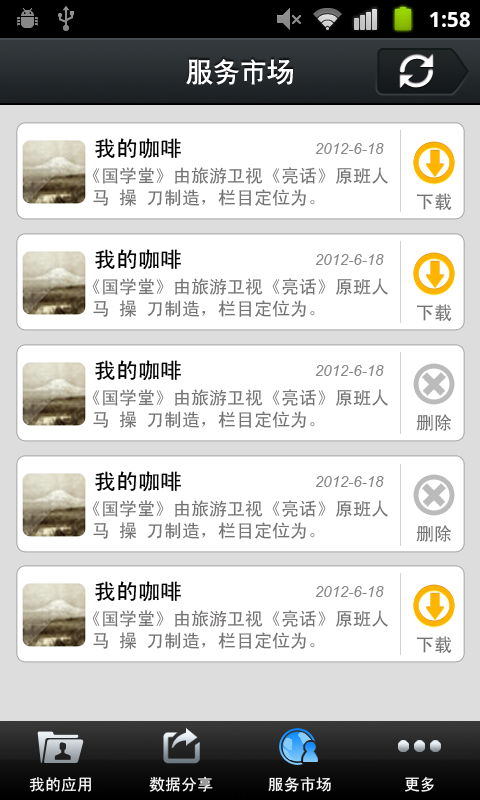
<style>
.page{position:relative;width:480px;height:800px;background:#ffffff}
.page>*{position:absolute;margin:0}
.t1{font:27px "CTCuHeiSJ";color:#ffffff}
.t2{font:22px "SimHei";color:#000000}
.t3{font:15px "Arial-ItalicMT";color:#878787}
.t4{font:18px/22px "SimHei";color:#747272}
.t5{font:18px "SimHei";color:#747272}
.t6{font:16px "SimHei";color:#ffffff}
</style>
<div class="page">
<p class="t1" style="left:186px;top:58px;width:107px;height:27px">服务市场</p>
<p class="t2" style="left:95px;top:138px;width:86px;height:21px">我的咖啡</p>
<p class="t3" style="left:315px;top:143px;width:69px;height:11px">2012-6-18</p>
<p class="t4" style="left:92px;top:167px;width:296px;height:39px">《国学堂》由旅游卫视《亮话》原班人<br> 马 操 刀制造，栏目定位为。</p>
<p class="t5" style="left:416px;top:193px;width:36px;height:17px">下载</p>
<p class="t2" style="left:95px;top:249px;width:86px;height:21px">我的咖啡</p>
<p class="t3" style="left:315px;top:254px;width:69px;height:11px">2012-6-18</p>
<p class="t4" style="left:92px;top:278px;width:296px;height:39px">《国学堂》由旅游卫视《亮话》原班人<br> 马 操 刀制造，栏目定位为。</p>
<p class="t5" style="left:416px;top:304px;width:36px;height:17px">下载</p>
<p class="t2" style="left:95px;top:360px;width:86px;height:21px">我的咖啡</p>
<p class="t3" style="left:315px;top:365px;width:69px;height:11px">2012-6-18</p>
<p class="t4" style="left:92px;top:389px;width:296px;height:39px">《国学堂》由旅游卫视《亮话》原班人<br> 马 操 刀制造，栏目定位为。</p>
<p class="t5" style="left:416px;top:414px;width:35px;height:17px">删除</p>
<p class="t2" style="left:95px;top:471px;width:86px;height:21px">我的咖啡</p>
<p class="t3" style="left:315px;top:476px;width:69px;height:11px">2012-6-18</p>
<p class="t4" style="left:92px;top:500px;width:296px;height:39px">《国学堂》由旅游卫视《亮话》原班人<br> 马 操 刀制造，栏目定位为。</p>
<p class="t5" style="left:416px;top:525px;width:35px;height:17px">删除</p>
<p class="t2" style="left:95px;top:581px;width:86px;height:21px">我的咖啡</p>
<p class="t3" style="left:315px;top:586px;width:69px;height:11px">2012-6-18</p>
<p class="t4" style="left:92px;top:610px;width:296px;height:39px">《国学堂》由旅游卫视《亮话》原班人<br> 马 操 刀制造，栏目定位为。</p>
<p class="t5" style="left:416px;top:636px;width:36px;height:17px">下载</p>
<p class="t6" style="left:29px;top:777px;width:62px;height:15px">我的应用</p>
<p class="t6" style="left:149px;top:776px;width:64px;height:16px">数据分享</p>
<p class="t6" style="left:268px;top:776px;width:63px;height:16px">服务市场</p>
<p class="t6" style="left:405px;top:776px;width:29px;height:16px">更多</p>
</div>
